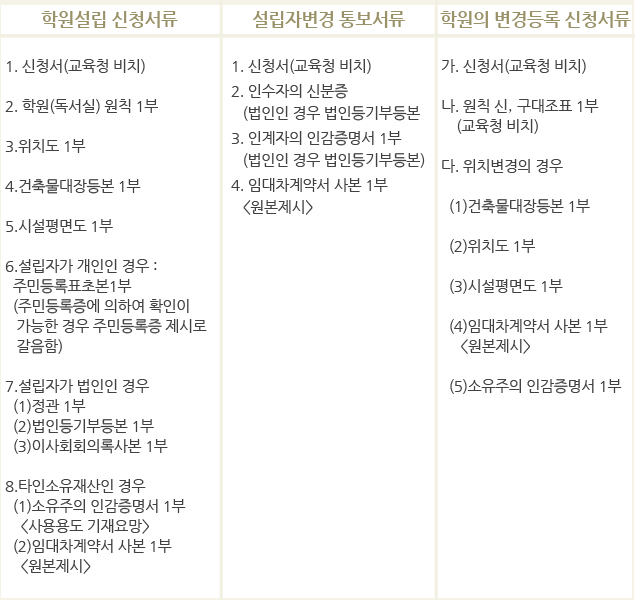
<style>
.page{position:relative;width:635px;height:600px;background:#ffffff}
.page>*{position:absolute;margin:0}
.t1{font:18px "NanumGothicBold";letter-spacing:-0.025em;color:#999167}
.t2{font:15px/20px "NanumGothic";letter-spacing:-0.025em;color:#414141}
.t3{font:15px/25px "NanumGothic";letter-spacing:-0.025em;color:#414141}
.t4{font:15px/22px "NanumGothic";letter-spacing:-0.025em;color:#414141}
.t5{font:15px/20px "Gulim";letter-spacing:-0.025em;color:#414141}
</style>
<div class="page">
<p class="t1" style="left:41px;top:11px;width:137px;height:17px">학원설립 신청서류</p>
<p class="t1" style="left:252px;top:11px;width:153px;height:17px">설립자변경 통보서류</p>
<p class="t1" style="left:440px;top:11px;width:191px;height:17px">학원의 변경등록 신청서류</p>
<p class="t2" style="left:5px;top:59px;width:202px;height:515px">1. 신청서(교육청 비치)<br><br>2. 학원(독서실) 원칙 1부<br><br>3.위치도 1부 <br><br>4.건축물대장등본 1부 <br><br>5.시설평면도 1부 <br><br>6.설립자가 개인인 경우 : <br>  주민등록표초본1부<br>  (주민등록증에 의하여 확인이<br>   가능한 경우 주민등록증 제시로<br>   갈음함) <br><br>7.설립자가 법인인 경우<br>  (1)정관 1부<br>  (2)법인등기부등본 1부<br>  (3)이사회회의록사본 1부 <br><br>8.타인소유재산인 경우<br>  (1)소유주의 인감증명서 1부 <br>    &lt;사용용도 기재요망&gt;<br>  (2)임대차계약서 사본 1부 <br>    &lt;원본제시&gt;</p>
<p class="t3" style="left:231px;top:59px;width:194px;height:156px">1. 신청서(교육청 비치)<br>2. 인수자의 신분증<br><span class="t4">   (법인인 경우 법인등기부등본<br></span>3. 인계자의 인감증명서 1부<br><span class="t4">   (법인인 경우 법인등기부등본)<br></span>4. 임대차계약서 사본 1부<br><span class="t4">   &lt;원본제시&gt;</span></p>
<p class="t2" style="left:441px;top:59px;width:181px;height:335px">가. 신청서(교육청 비치) <br><br>나. 원칙 신<span class="t5">, </span>구대조표 1부 <br>    (교육청 비치) <br><br>다. 위치변경의 경우 <br><br>  (1)건축물대장등본 1부 <br><br>  (2)위치도 1부 <br><br>  (3)시설평면도 1부 <br><br>  (4)임대차계약서 사본 1부 <br>     &lt;원본제시&gt; <br><br>  (5)소유주의 인감증명서 1부</p>
</div>
